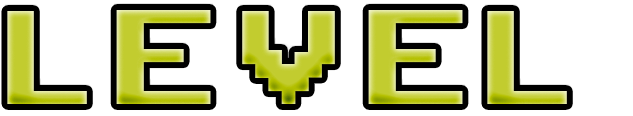
<style>
.page{position:relative;width:633px;height:116px;background:#ffffff}
.page>*{position:absolute;margin:0}
.t1{font:185.5px "ArcadeClassic"}
</style>
<div class="page">
<p class="t1" style="left:7px;top:10px;width:560px;height:94px">le v e l</p>
</div>
